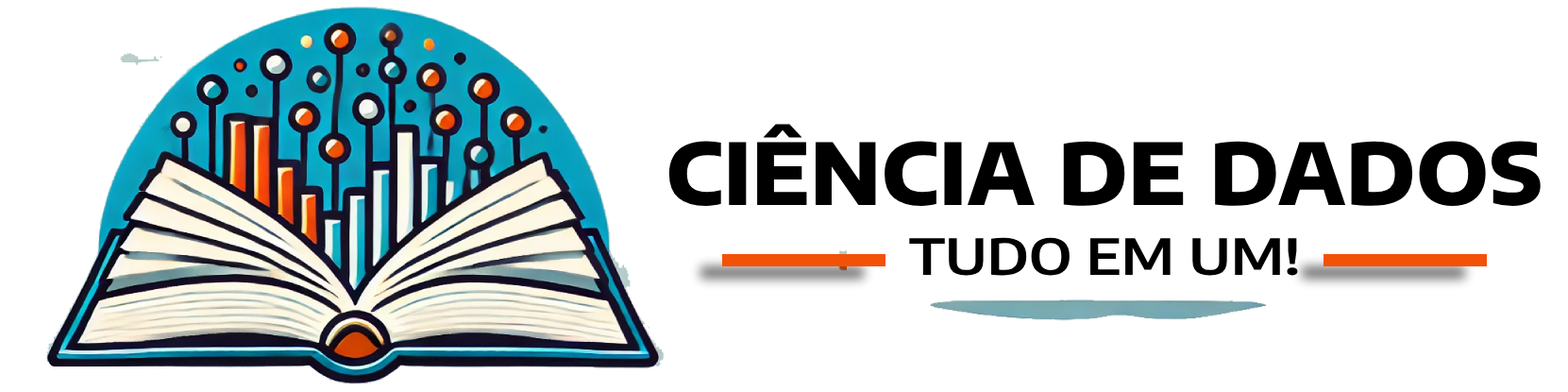
<style>
.page{position:relative;width:1568px;height:392px;background:#ffffff}
.page>*{position:absolute;margin:0}
.t1{font:84.9px "EncodeSansSemiExpanded-ExtraBold";color:#000000}
.t2{font:49.6px "EncodeSansSemiCondensed-SemiBold";color:#000000;scale:1.24 1}
</style>
<div class="page">
<p class="t1" style="left:668px;top:124px;width:873px;height:82px">CIÊNCIA DE DADOS</p>
<p class="t2" style="left:909px;top:237px;width:389px;height:39px">TUDO EM UM!</p>
</div>
